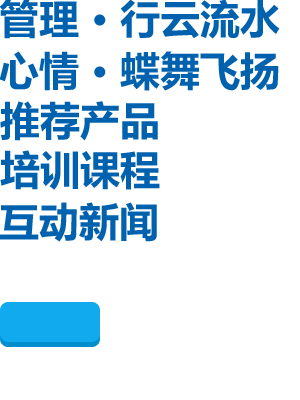
<style>
.page{position:relative;width:300px;height:400px;background:#ffffff}
.page>*{position:absolute;margin:0}
.t1{font:40px/52px "MicrosoftYaHei-Bold";color:#0061ae}
.t2{font:40px "MicrosoftYaHei-Bold";color:#0061ae}
</style>
<div class="page">
<p class="t1" style="left:0px;top:0px;width:280px;height:91px">管理 · 行云流水<br>心情 · 蝶舞飞扬</p>
<p class="t2" style="left:0px;top:101px;width:158px;height:40px">推荐产品</p>
<p class="t2" style="left:0px;top:150px;width:160px;height:40px">培训课程</p>
<p class="t2" style="left:0px;top:202px;width:157px;height:40px">互动新闻</p>
</div>
